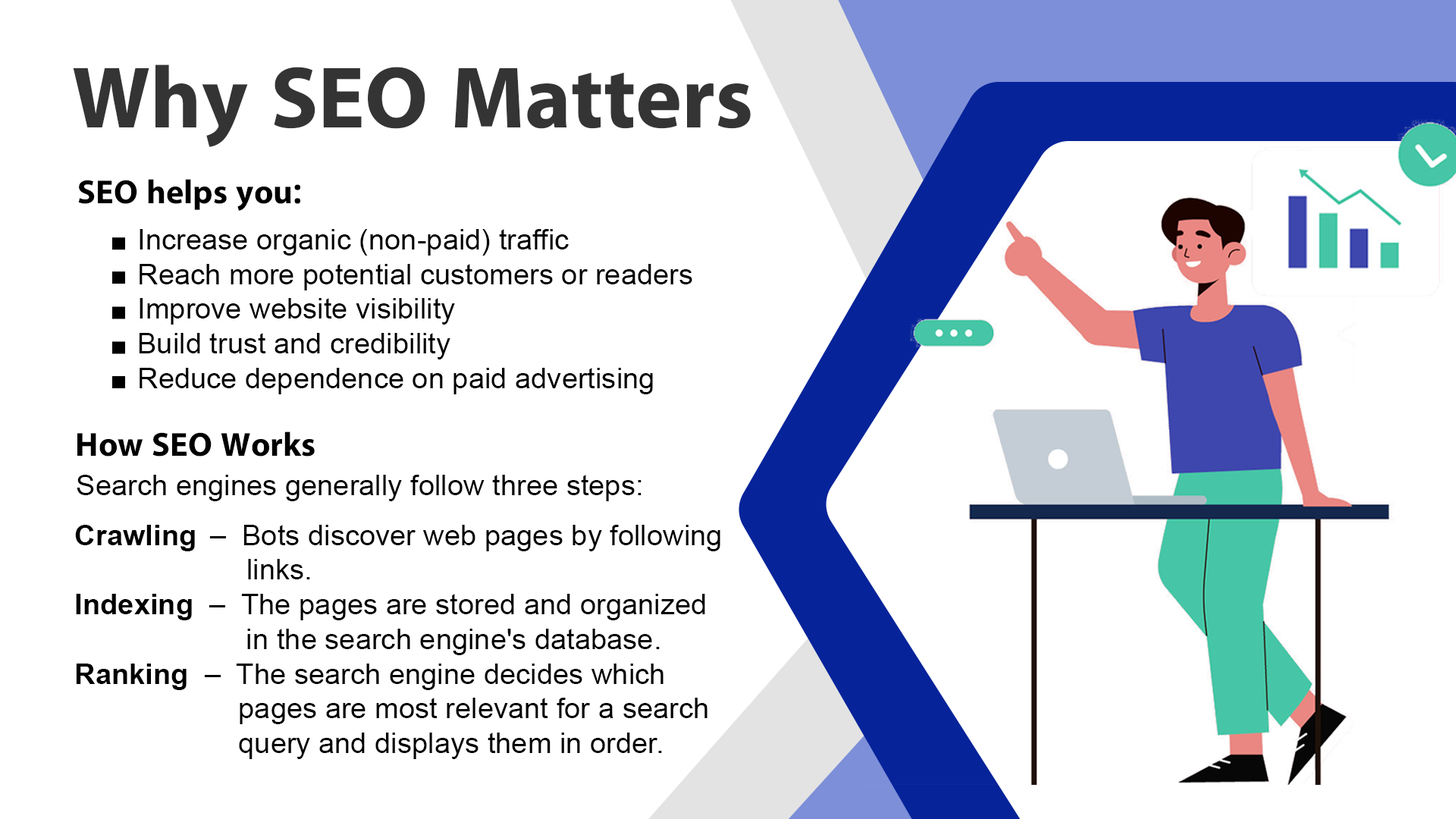
<style>
.page{position:relative;width:1456px;height:819px;background:#ffffff}
.page>*{position:absolute;margin:0}
.t1{font:88px "iKampuchea001_O'Chrov";color:#343434}
.t2{font:33.6px "iKampuchea001_O'Chrov";color:#000000}
.t3{font:28.9px "ArialMT";color:#000000}
.t4{font:28.9px "Arial-BoldMT";color:#000000}
</style>
<div class="page">
<p class="t1" style="left:73px;top:64px;width:678px;height:83px">Why SEO Matters</p>
<p class="t2" style="left:78px;top:179px;width:222px;height:32px">SEO helps you:</p>
<p class="t3" style="left:139px;top:229px;width:553px;height:165px">Increase organic (non-paid) traffic<br>Reach more potential customers or readers<br>Improve website visibility<br>Build trust and credibility<br>Reduce dependence on paid advertising</p>
<p class="t2" style="left:77px;top:431px;width:238px;height:26px">How SEO Works</p>
<p class="t3" style="left:77px;top:475px;width:565px;height:26px">Search engines generally follow three steps:</p>
<p class="t3" style="left:75px;top:525px;width:645px;height:234px"><span class="t4">Crawling  </span>–  Bots discover web pages by following<br>                 links.<br><span class="t4">Indexing</span>  –  The pages are stored and organized <br>                in the search engine's database.<br><span class="t4">Ranking</span>  –  The search engine decides which <br>               pages are most relevant for a search <br>               query and displays them in order.</p>
</div>
